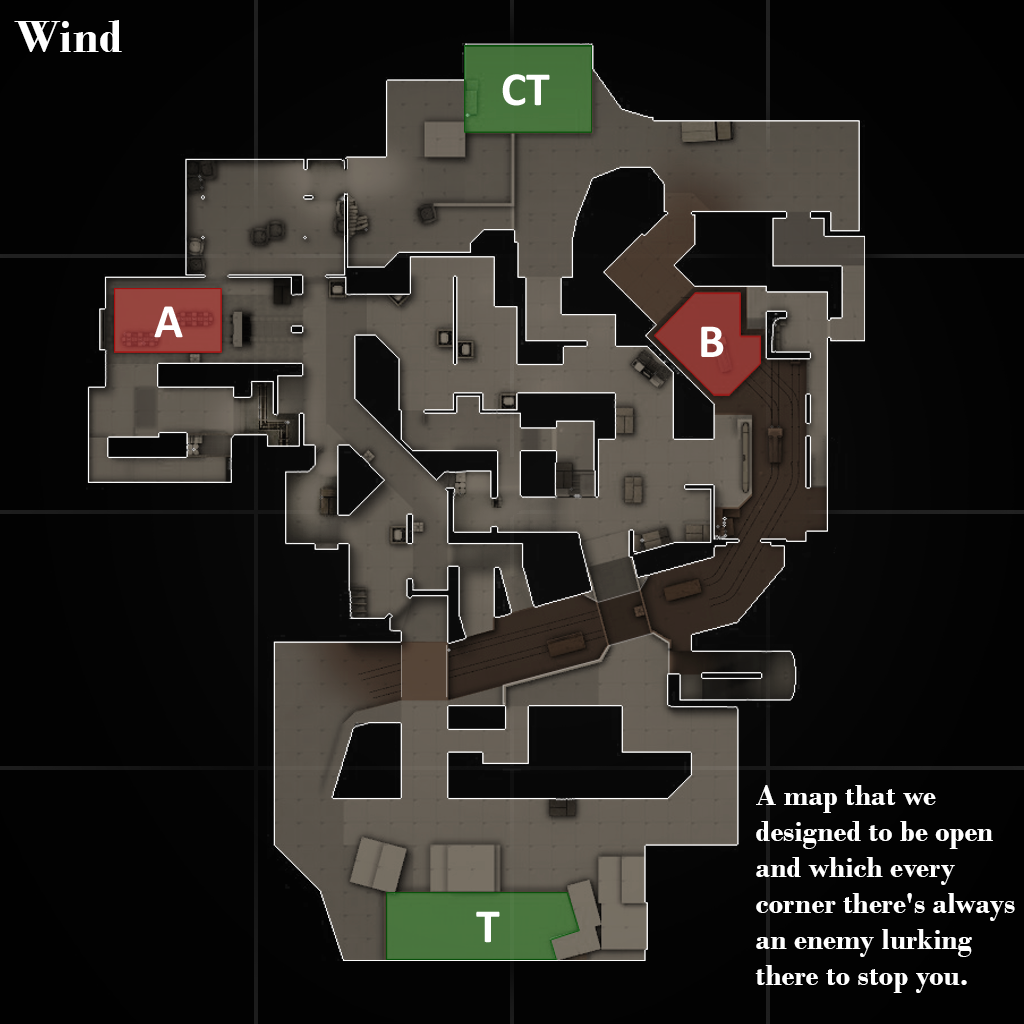
<style>
.page{position:relative;width:1024px;height:1024px}
.page>*{position:absolute;margin:0}
.t1{font:48px "BodoniMT-Bold";color:#ffffff}
.t2{font:30px "BodoniMT-Bold";color:#ffffff}
</style>
<div class="page">
<p class="t1" style="left:14px;top:20px;width:108px;height:32px">Wind</p>
<p class="t2" style="left:755px;top:785px;width:260px;height:208px">A map that we designed to be open and which every corner there's always an enemy lurking there to stop you.</p>
</div>
